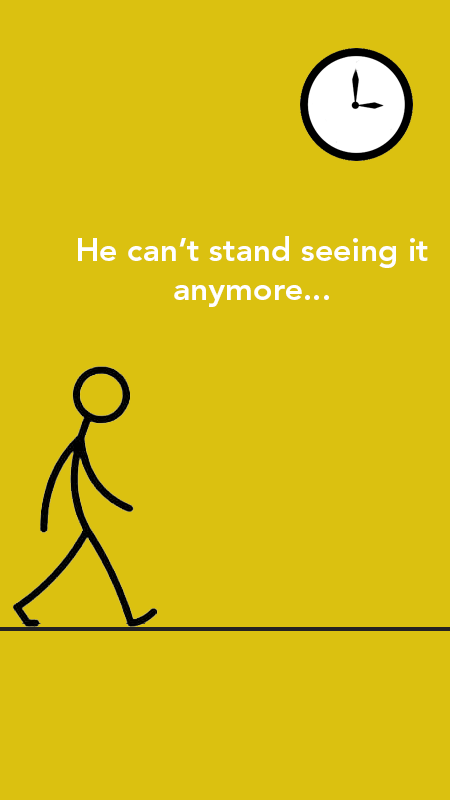
<style>
.page{position:relative;width:450px;height:800px;background:#dbc110}
.page>*{position:absolute;margin:0}
.t1{font:32px "AvenirLTStd-Heavy";color:#ffffff}
</style>
<div class="page">
<p class="t1" style="left:78px;top:236px;width:350px;height:71px;text-align:center">He can’t stand seeing it<br>anymore...</p>
</div>
